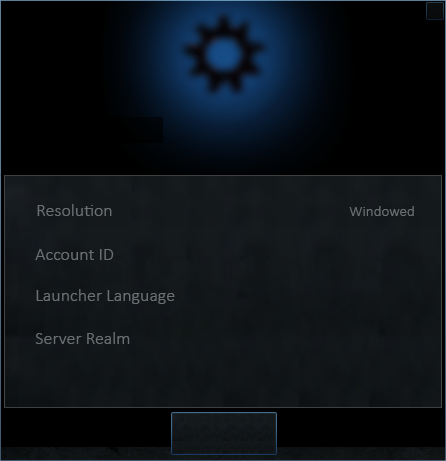
<style>
.page{position:relative;width:446px;height:461px;background:#000000}
.page>*{position:absolute;margin:0}
.t1{font:18px "Calibri-Light";color:#6a6f71}
.t2{font:15px "Calibri-Light";color:#6a6f71}
</style>
<div class="page">
<p class="t1" style="left:37px;top:204px;width:75px;height:12px">Resolution</p>
<p class="t2" style="left:349px;top:206px;width:65px;height:10px">Windowed</p>
<p class="t1" style="left:35px;top:249px;width:79px;height:11px">Account ID</p>
<p class="t1" style="left:36px;top:289px;width:139px;height:15px">Launcher Language</p>
<p class="t1" style="left:35px;top:332px;width:95px;height:12px">Server Realm</p>
</div>
